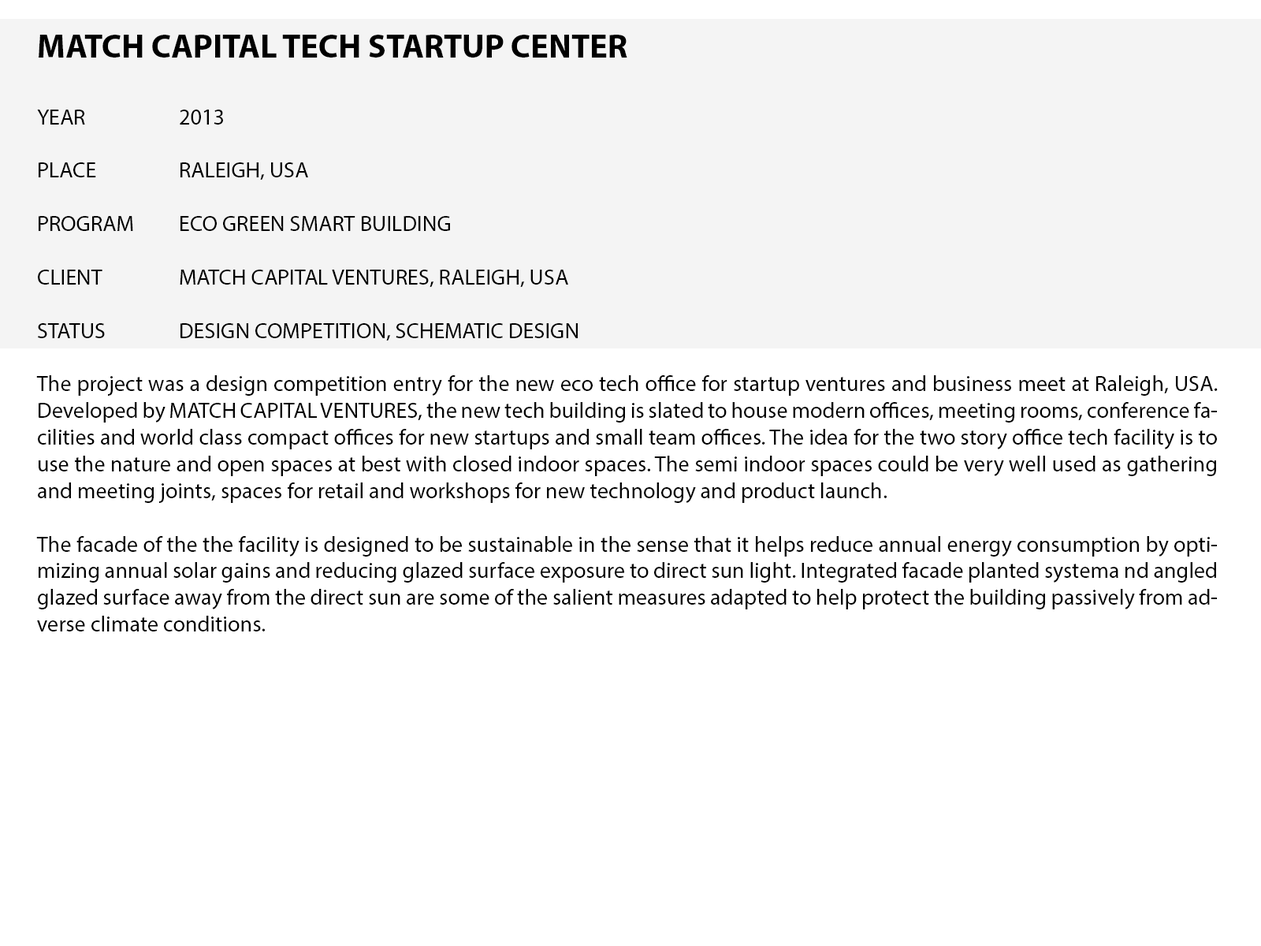
<style>
.page{position:relative;width:1261px;height:946px;background:#ffffff}
.page>*{position:absolute;margin:0}
.t1{font:22.2px "MyriadPro-Regular";color:#000000}
.t2{font:33.4px "MyriadPro-Bold";color:#000000}
</style>
<div class="page">
<p class="t1" style="left:36px;top:35px;width:1182px;height:596px;text-align:justify"><span class="t2">MATCH CAPITAL TECH STARTUP CENTER<br><br></span>YEAR    2013<br><br>PLACE   RALEIGH, USA<br><br>PROGRAM  ECO GREEN SMART BUILDING<br><br>CLIENT   MATCH CAPITAL VENTURES, RALEIGH, USA<br><br>STATUS   DESIGN COMPETITION, SCHEMATIC DESIGN<br><br>The project was a design competition entry for the new eco tech office for startup ventures and business meet at Raleigh, USA. Developed by MATCH CAPITAL VENTURES, the new tech building is slated to house modern offices, meeting rooms, conference facilities and world class compact offices for new startups and small team offices. The idea for the two story office tech facility is to use the nature and open spaces at best with closed indoor spaces. The semi indoor spaces could be very well used as gathering and meeting joints, spaces for retail and workshops for new technology and product launch.<br><br>The facade of the the facility is designed to be sustainable in the sense that it helps reduce annual energy consumption by optimizing annual solar gains and reducing glazed surface exposure to direct sun light. Integrated facade planted systema nd angled glazed surface away from the direct sun are some of the salient measures adapted to help protect the building passively from adverse climate conditions.</p>
</div>
